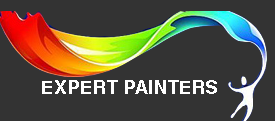
<style>
.page{position:relative;width:275px;height:121px;background:#333333}
.page>*{position:absolute;margin:0}
.t1{font:18.7px "Helvetica-Bold";color:#ffffff}
</style>
<div class="page">
<p class="t1" style="left:42px;top:80px;width:175px;height:14px">EXPERT PAINTERS</p>
</div>
